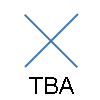
<style>
.page{position:relative;width:100px;height:100px;background:#ffffff}
.page>*{position:absolute;margin:0}
.t1{font:24px "ArialMT";color:#000000}
</style>
<div class="page">
<p class="t1" style="left:29px;top:77px;width:45px;height:17px">TBA</p>
</div>
